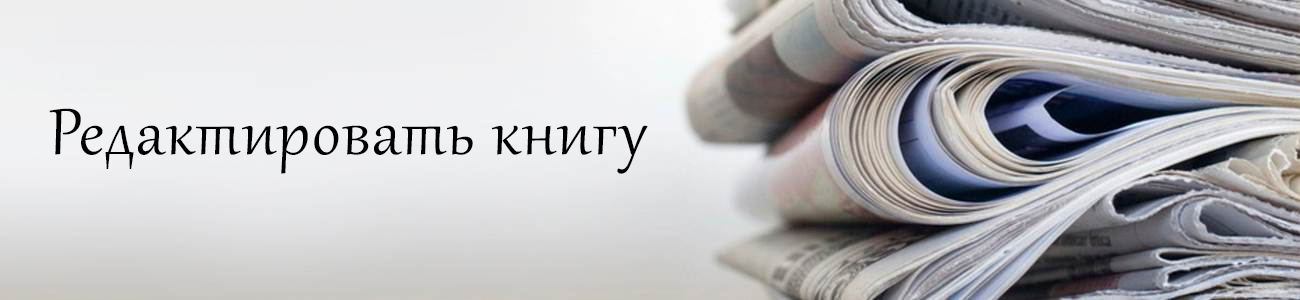
<style>
.page{position:relative;width:1300px;height:300px}
.page>*{position:absolute;margin:0}
.t1{font:80px "Gabriola";letter-spacing:0.02em;color:#000000}
</style>
<div class="page">
<p class="t1" style="left:49px;top:108px;width:599px;height:66px">Редактировать книгу</p>
</div>
